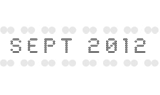
<style>
.page{position:relative;width:160px;height:95px;background:#ffffff}
.page>*{position:absolute;margin:0}
.t1{font:22px "SynchroLetPlain";letter-spacing:0.2em;color:#7b7b7b}
</style>
<div class="page">
<p class="t1" style="left:10px;top:38px;width:136px;height:15px">SEPT 2012</p>
</div>
